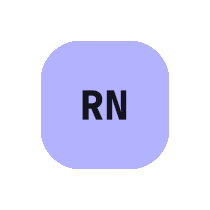
<style>
.page{position:relative;width:210px;height:210px;background:#ffffff}
.page>*{position:absolute;margin:0}
.t1{font:40px "JetBrainsMono-ExtraBold";letter-spacing:0.013em;color:#14141f;text-transform:uppercase}
</style>
<div class="page">
<p class="t1" style="left:81px;top:89px;width:46px;height:31px">SD</p>
<p class="t1" style="left:81px;top:89px;width:46px;height:31px">SO</p>
<p class="t1" style="left:81px;top:89px;width:47px;height:31px">8K</p>
<p class="t1" style="left:81px;top:89px;width:47px;height:31px">9K</p>
<p class="t1" style="left:82px;top:89px;width:45px;height:31px">NC</p>
<p class="t1" style="left:82px;top:89px;width:45px;height:31px">CN</p>
<p class="t1" style="left:82px;top:89px;width:46px;height:31px">2K</p>
<p class="t1" style="left:82px;top:89px;width:46px;height:31px">2P</p>
<p class="t1" style="left:81px;top:90px;width:47px;height:30px">AP</p>
<p class="t1" style="left:81px;top:90px;width:47px;height:30px">6K</p>
<p class="t1" style="left:81px;top:90px;width:47px;height:30px">7K</p>
<p class="t1" style="left:81px;top:90px;width:47px;height:30px">MR</p>
<p class="t1" style="left:82px;top:90px;width:45px;height:30px">NF</p>
<p class="t1" style="left:82px;top:90px;width:46px;height:30px">HR</p>
<p class="t1" style="left:82px;top:90px;width:45px;height:30px">PF</p>
<p class="t1" style="left:82px;top:90px;width:45px;height:30px">HD</p>
<p class="t1" style="left:82px;top:90px;width:45px;height:30px">FL</p>
<p class="t1" style="left:82px;top:90px;width:46px;height:30px">RX</p>
<p class="t1" style="left:82px;top:90px;width:46px;height:30px">4K</p>
<p class="t1" style="left:82px;top:90px;width:46px;height:30px">5K</p>
<p class="t1" style="left:82px;top:90px;width:45px;height:30px">RN</p>
</div>
